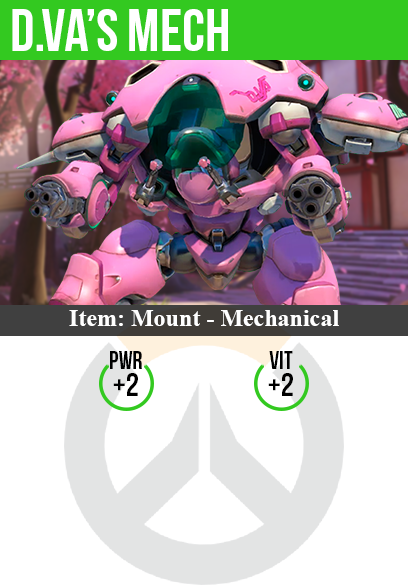
<style>
.page{position:relative;width:408px;height:585px;background:#ffffff}
.page>*{position:absolute;margin:0}
.t1{font:60px "BebasNeue";color:#ffffff}
.t2{font:24px "TimesNewRomanPS-BoldMT";color:#ffffff}
.t3{font:25px "BebasNeue";color:#000000}
.t4{font:32px "BebasNeue";color:#000000}
</style>
<div class="page">
<p class="t1" style="left:12px;top:9px;width:216px;height:42px">d.va’s mech</p>
<p class="t2" style="left:69px;top:310px;width:270px;height:16px">Item: Mount - Mechanical</p>
<p class="t3" style="left:110px;top:351px;width:32px;height:18px">pwr</p>
<p class="t3" style="left:269px;top:351px;width:24px;height:18px">vit</p>
<p class="t4" style="left:113px;top:373px;width:25px;height:23px">+2</p>
<p class="t4" style="left:268px;top:373px;width:25px;height:23px">+2</p>
</div>
